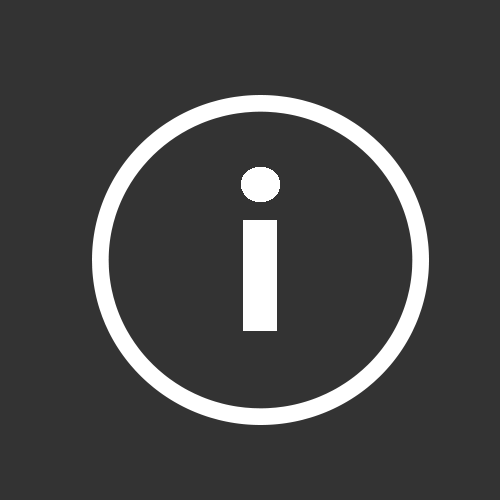
<style>
.page{position:relative;width:500px;height:500px;background:#333333}
.page>*{position:absolute;margin:0}
.t1{font:220.8px "Gadugi-Bold";color:#ffffff}
</style>
<div class="page">
<p class="t1" style="left:241px;top:167px;width:39px;height:164px">i</p>
</div>
